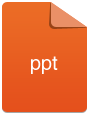
<style>
.page{position:relative;width:88px;height:113px}
.page>*{position:absolute;margin:0}
.t1{font:20px "Helvetica";color:#ffffff}
</style>
<div class="page">
<p class="t1" style="left:31px;top:56px;width:27px;height:18px">ppt</p>
</div>
